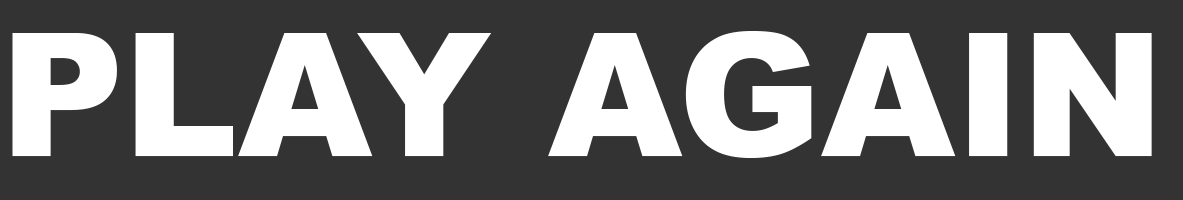
<style>
.page{position:relative;width:1183px;height:200px;background:#333333}
.page>*{position:absolute;margin:0}
.t1{font:171.7px "Arial-Black";color:#ffffff}
</style>
<div class="page">
<p class="t1" style="left:12px;top:31px;width:1140px;height:127px">PLAY AGAIN</p>
</div>
